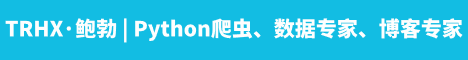
<style>
.page{position:relative;width:468px;height:60px;background:#12bde3}
.page>*{position:absolute;margin:0}
.t1{font:21px "SourceHanSansSC-Heavy";color:#fefefe}
</style>
<div class="page">
<p class="t1" style="left:5px;top:18px;width:458px;height:25px">TRHX·鲍勃 | Python爬虫、数据专家、博客专家</p>
</div>
